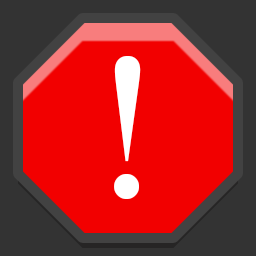
<style>
.page{position:relative;width:256px;height:256px;background:#f20000}
.page>*{position:absolute;margin:0}
.t1{font:210.9px "BaskOldFace";letter-spacing:-0.02em;color:#ffffff}
</style>
<div class="page">
<p class="t1" style="left:114px;top:56px;width:27px;height:143px">!</p>
</div>
